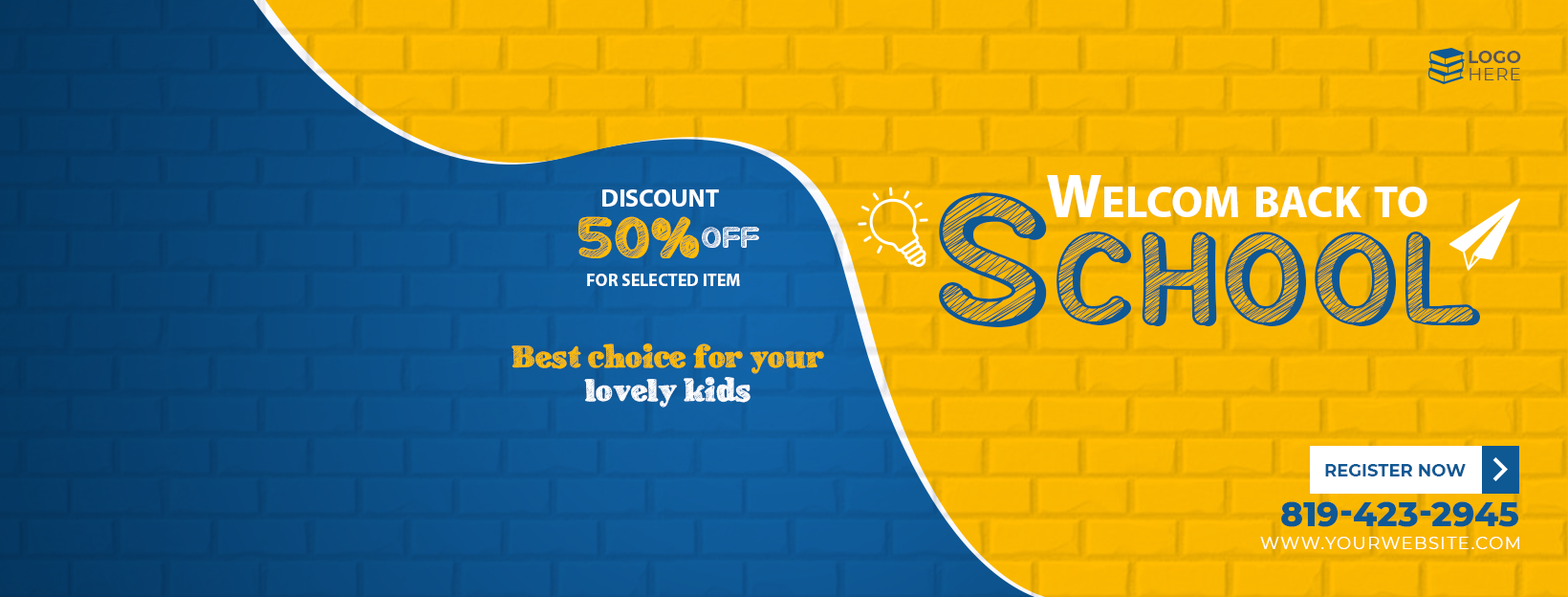
<style>
.page{position:relative;width:1568px;height:597px}
.page>*{position:absolute;margin:0}
.t1{font:17.2px "Montserrat-Bold";color:#595757;text-transform:uppercase}
.t2{font:17.2px "Montserrat-Regular";letter-spacing:0.05em;color:#595757;text-transform:uppercase}
.t3{font:63.1px "MyriadPro-Bold";color:#ffffff;font-variant:small-caps}
.t4{font:24.9px "MyriadPro-Bold";color:#ffffff;text-transform:uppercase}
.t5{font:179.7px "SippinOnSunshine";color:#0e5894;font-variant:small-caps}
.t6{font:55.5px "SippinOnSunshine";color:#ffbc01;text-transform:uppercase}
.t7{font:28.7px "SippinOnSunshine";color:#ffffff;text-transform:uppercase}
.t8{font:17.2px "MyriadPro-Bold";color:#ffffff;text-transform:uppercase}
.t9{font:30.6px "SchoolBookNew";color:#ffbc01}
.t10{font:30.6px "SchoolBookNew";color:#ffffff}
.t11{font:17.2px "Montserrat-Bold";color:#0e5894;text-transform:uppercase}
.t12{font:34.4px "Montserrat-ExtraBold";color:#0e5894;text-transform:uppercase}
.t13{font:17.2px "Montserrat-Regular";letter-spacing:0.075em;color:#ffffff;text-transform:uppercase}
</style>
<div class="page">
<p class="t1" style="left:1469px;top:51px;width:52px;height:12px">Logo</p>
<p class="t2" style="left:1470px;top:68px;width:50px;height:12px">Here</p>
<p class="t3" style="left:1047px;top:175px;width:380px;height:42px">Welcom back to</p>
<p class="t4" style="left:602px;top:189px;width:117px;height:18px">Discount</p>
<p class="t5" style="left:939px;top:192px;width:541px;height:136px">School</p>
<p class="t6" style="left:578px;top:216px;width:121px;height:43px">50%</p>
<p class="t7" style="left:702px;top:227px;width:57px;height:21px">Off</p>
<p class="t8" style="left:587px;top:273px;width:153px;height:13px">For selected item</p>
<p class="t9" style="left:512px;top:343px;width:312px;height:31px">Best choice for your</p>
<p class="t10" style="left:584px;top:377px;width:167px;height:30px">lovely kids</p>
<p class="t11" style="left:1325px;top:464px;width:141px;height:12px">register Now</p>
<p class="t12" style="left:1281px;top:501px;width:237px;height:26px">819-423-2945</p>
<p class="t13" style="left:1260px;top:536px;width:259px;height:13px">Www.yourwebsite.com</p>
</div>
